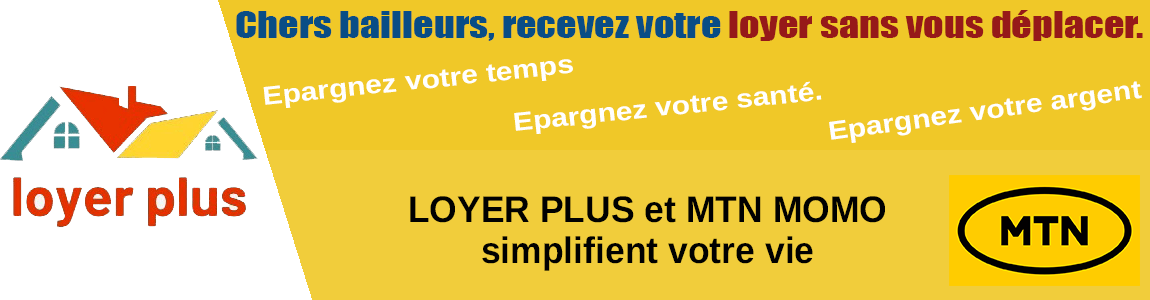
<style>
.page{position:relative;width:1150px;height:300px;background:#f0c828}
.page>*{position:absolute;margin:0}
.t1{font:34px "Impact";color:#094d86;scale:1.18 1}
.t2{font:34px "Impact";color:#961919;scale:1.18 1}
.t3{font:26px "Arimo-Bold";color:#ffffff;scale:1.15 1}
.t4{font:37px/41px "Arimo-Bold";color:#010101;scale:0.96 1}
</style>
<div class="page">
<p class="t1" style="left:236px;top:10px;width:907px;height:31px">Chers bailleurs, recevez votre <span class="t2">loyer sans vous déplacer.</span></p>
<p class="t3" style="left:263px;top:59px;width:310px;height:49px;rotate:-6deg">Epargnez votre temps</p>
<p class="t3" style="left:514px;top:81px;width:308px;height:53px;rotate:-6deg">Epargnez votre santé.</p>
<p class="t3" style="left:829px;top:81px;width:313px;height:62px;rotate:-8deg">Epargnez votre argent</p>
<p class="t4" style="left:410px;top:196px;width:475px;height:75px;text-align:center">LOYER PLUS et MTN MOMO<br>simplifient votre vie</p>
</div>
